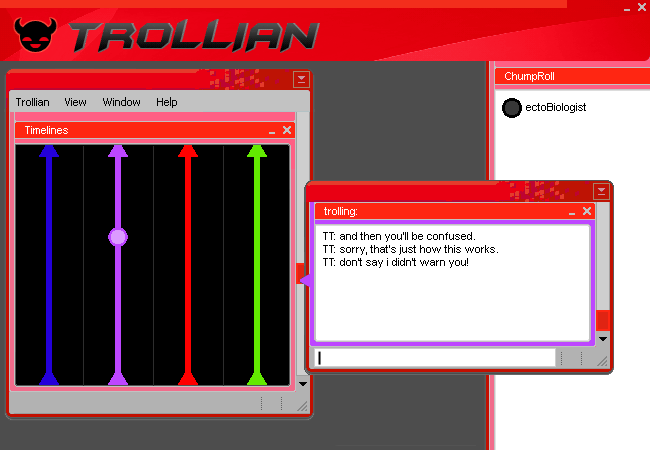
<style>
.page{position:relative;width:650px;height:450px;background:#ffffff}
.page>*{position:absolute;margin:0}
.t1{font:11px "ArialMT";color:#000000}
.t2{font:11px "ArialMT";color:#ffffff}
</style>
<div class="page">
<p class="t1" style="left:526px;top:103px;width:60px;height:10px">ectoBiologist</p>
<p class="t2" style="left:324px;top:207px;width:33px;height:10px">trolling:</p>
<p class="t1" style="left:323px;top:232px;width:175px;height:36px">TT: and then you’ll be confused.<br>TT: sorry, that’s just how this works.<br>TT: don’t say i didn’t warn you!</p>
</div>
